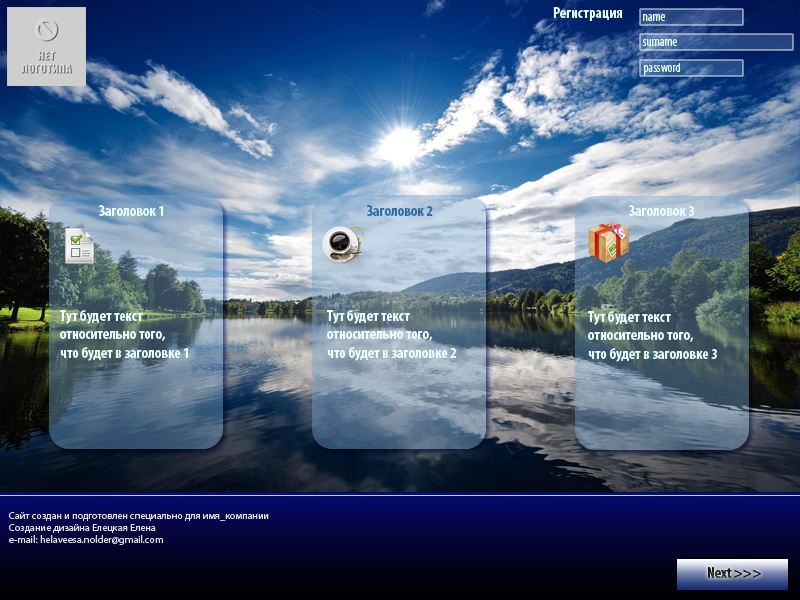
<style>
.page{position:relative;width:800px;height:600px}
.page>*{position:absolute;margin:0}
.t1{font:15.2px "MyriadPro-BoldCond";color:#e7ffff}
.t2{font:12.7px "MyriadPro-Cond";color:#e7ffff}
.t3{font:15.2px "MyriadPro-BoldCond";color:#326da2}
.t4{font:10.2px "MyriadPro-Regular";color:#e2dedb}
.t5{font:15.2px "MyriadPro-BoldCond";color:#1d1e1f}
</style>
<div class="page">
<p class="t1" style="left:553px;top:7px;width:70px;height:14px">Регистрация</p>
<p class="t2" style="left:643px;top:14px;width:22px;height:7px">name</p>
<p class="t2" style="left:642px;top:39px;width:35px;height:7px">surname</p>
<p class="t2" style="left:644px;top:63px;width:36px;height:12px">password</p>
<p class="t1" style="left:99px;top:205px;width:65px;height:11px">Заголовок 1</p>
<p class="t3" style="left:367px;top:205px;width:66px;height:11px">Заголовок 2</p>
<p class="t1" style="left:629px;top:205px;width:66px;height:11px">Заголовок 3</p>
<p class="t1" style="left:60px;top:310px;width:128px;height:51px">Тут будет текст <br>относительно того, <br>что будет в заголовке 1</p>
<p class="t1" style="left:327px;top:310px;width:130px;height:51px">Тут будет текст <br>относительно того, <br>что будет в заголовке 2</p>
<p class="t1" style="left:588px;top:311px;width:129px;height:51px">Тут будет текст <br>относительно того, <br>что будет в заголовке 3</p>
<p class="t4" style="left:9px;top:512px;width:260px;height:33px">Сайт создан и подготовлен специально для имя_компании<br>Создание дизайна Елецкая Елена<br>e-mail: helaveesa.nolder@gmail.com</p>
<p class="t5" style="left:708px;top:567px;width:53px;height:11px">Next &gt;&gt;&gt;</p>
</div>
